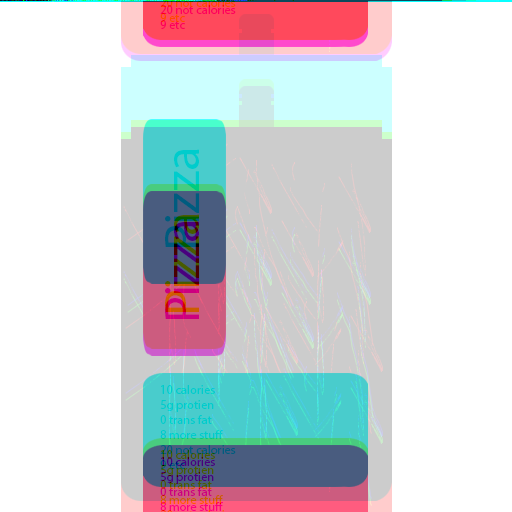
<style>
.page{position:relative;width:512px;height:512px;background:#ffffff}
.page>*{position:absolute;margin:0}
.t1{font:50px "MyriadPro-Regular"}
.t2{font:12.5px "MyriadPro-Regular"}
</style>
<div class="page">
<p class="t1" style="left:165px;top:147px;width:34px;height:98px;rotate:-90deg">Pizza</p>
<p class="t2" style="left:160px;top:383px;width:76px;height:84px">10 calories<br>5g protien<br>0 trans fat<br>8 more stuff<br>20 not calories<br>9 etc</p>
</div>
